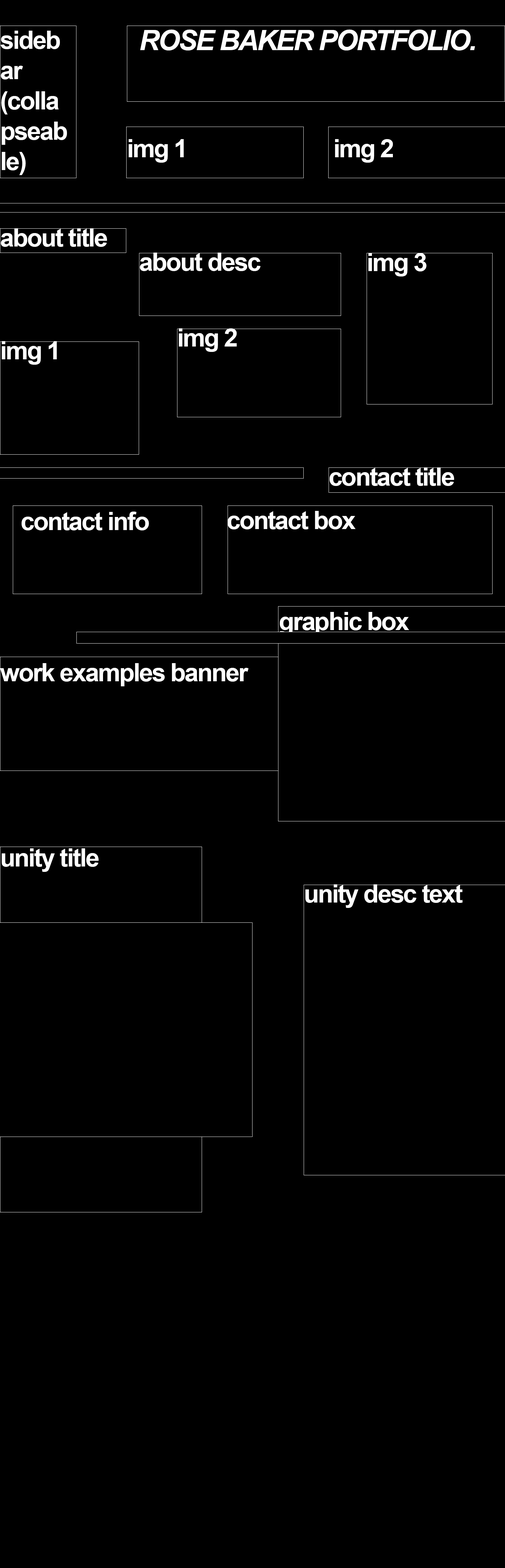
<style>
.page{position:relative;width:505px;height:1568px;background:#000000}
.page>*{position:absolute;margin:0}
.t1{font:28.1px "Arial-BoldItalicMT";letter-spacing:-0.05em;color:#ffffff}
.t2{font:25.3px "Arial-BoldMT";letter-spacing:-0.05em;color:#ffffff}
</style>
<div class="page">
<p class="t1" style="left:140px;top:29px;width:335px;height:22px">ROSE BAKER PORTFOLIO.</p>
<p class="t2" style="left:0px;top:31px;width:67px;height:144px">sidebar (collapseable)</p>
<p class="t2" style="left:129px;top:139px;width:55px;height:24px">img 1</p>
<p class="t2" style="left:335px;top:139px;width:58px;height:24px">img 2</p>
<p class="t2" style="left:1px;top:228px;width:106px;height:19px">about title</p>
<p class="t2" style="left:140px;top:253px;width:121px;height:18px">about desc</p>
<p class="t2" style="left:368px;top:253px;width:59px;height:23px">img 3</p>
<p class="t2" style="left:179px;top:328px;width:58px;height:24px">img 2</p>
<p class="t2" style="left:2px;top:341px;width:55px;height:24px">img 1</p>
<p class="t2" style="left:330px;top:467px;width:124px;height:19px">contact title</p>
<p class="t2" style="left:22px;top:512px;width:127px;height:18px">contact info</p>
<p class="t2" style="left:228px;top:511px;width:128px;height:18px">contact box</p>
<p class="t2" style="left:280px;top:612px;width:129px;height:23px">graphic box</p>
<p class="t2" style="left:0px;top:663px;width:249px;height:23px">work examples banner</p>
<p class="t2" style="left:2px;top:848px;width:97px;height:24px">unity title</p>
<p class="t2" style="left:305px;top:884px;width:158px;height:24px">unity desc text</p>
</div>
